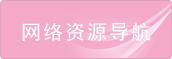
<style>
.page{position:relative;width:172px;height:59px;background:#f4a9c9}
.page>*{position:absolute;margin:0}
.t1{font:20px "SimHei";letter-spacing:0.1em;color:#ffffff}
</style>
<div class="page">
<p class="t1" style="left:22px;top:22px;width:129px;height:20px">网络资源导航</p>
</div>
